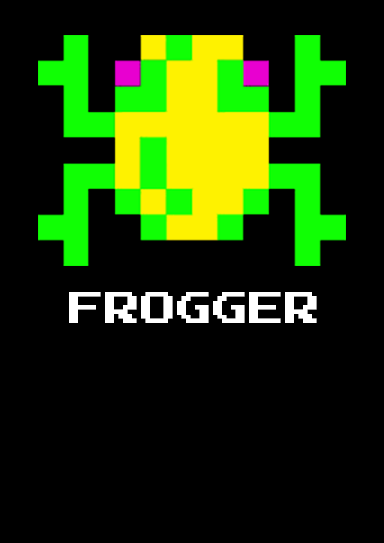
<style>
.page{position:relative;width:384px;height:543px;background:#000000}
.page>*{position:absolute;margin:0}
.t1{font:36px "PressStart2P-Regular";color:#ffffff}
</style>
<div class="page">
<p class="t1" style="left:69px;top:292px;width:248px;height:31px">FROGGER</p>
</div>
